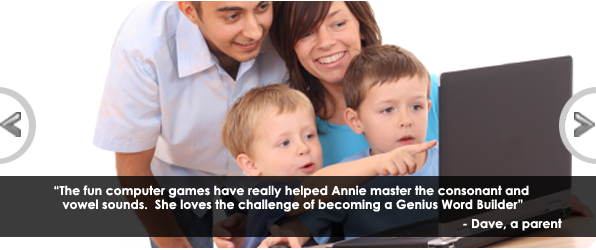
<style>
.page{position:relative;width:596px;height:250px;background:#ffffff}
.page>*{position:absolute;margin:0}
.t1{font:12.5px/13.9px "CenturyGothic-Bold";color:#ffffff}
.t2{font:12.5px "CenturyGothic-Bold";color:#ffffff}
</style>
<div class="page">
<p class="t1" style="left:54px;top:185px;width:475px;height:27px;text-align:center">“The fun computer games have really helped Annie master the consonant and <br>vowel sounds.  She loves the challenge of becoming a Genius Word Builder”</p>
<p class="t2" style="left:463px;top:218px;width:99px;height:13px">- Dave, a parent</p>
</div>
